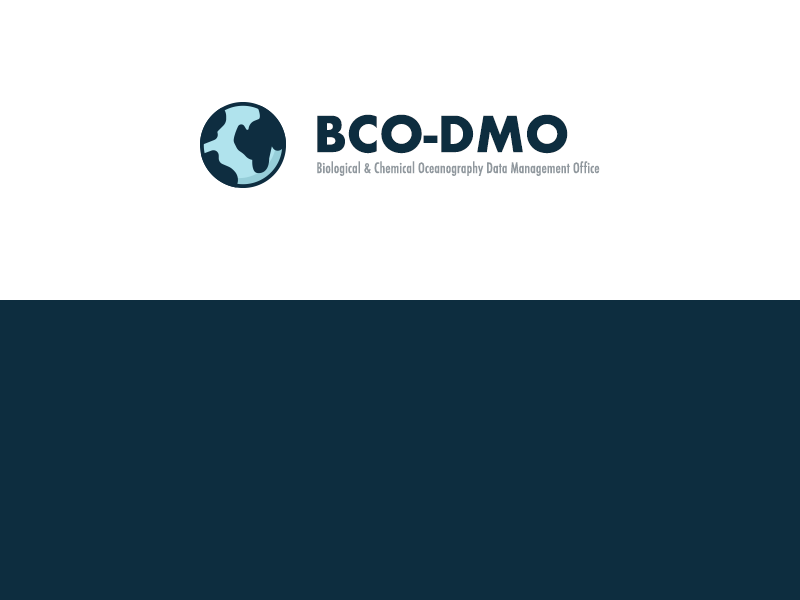
<style>
.page{position:relative;width:800px;height:600px;background:#0d2d3f}
.page>*{position:absolute;margin:0}
.t1{font:48px "Futura-Bold";color:#0d2d3f;text-transform:uppercase}
.t2{font:14px "Futura-CondensedMedium";letter-spacing:0.01em;color:#90989e}
</style>
<div class="page">
<p class="t1" style="left:317px;top:114px;width:251px;height:40px">BCO-DMO</p>
<p class="t2" style="left:317px;top:161px;width:283px;height:15px">Biological &amp; Chemical Oceanography Data Management Office</p>
</div>
